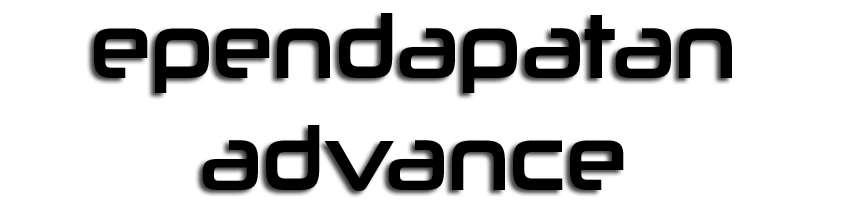
<style>
.page{position:relative;width:850px;height:200px;background:#ffffff}
.page>*{position:absolute;margin:0}
.t1{font:91.1px "NeuropoliticalRg-Regular";color:#000000;scale:0.83 1}
</style>
<div class="page">
<p class="t1" style="left:94px;top:13px;width:638px;height:80px">ependapatan</p>
<p class="t1" style="left:202px;top:125px;width:422px;height:66px">advance</p>
</div>
